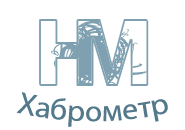
<style>
.page{position:relative;width:185px;height:130px;background:#ffffff}
.page>*{position:absolute;margin:0}
.t1{font:30px "MyriadPro-Regular";color:#53798b}
</style>
<div class="page">
<p class="t1" style="left:16px;top:92px;width:152px;height:35px">Хаброметр</p>
</div>
